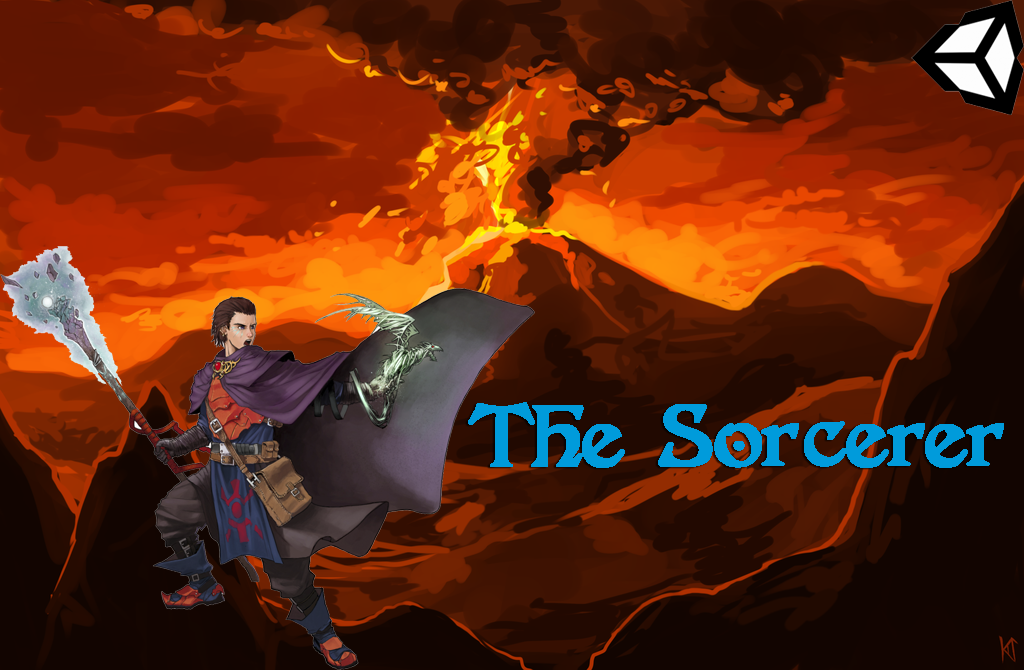
<style>
.page{position:relative;width:1024px;height:670px}
.page>*{position:absolute;margin:0}
.t1{font:96px "FantaisieArtistique";color:#009bdb;font-weight:bold}
</style>
<div class="page">
<p class="t1" style="left:468px;top:402px;width:536px;height:66px">The Sorcerer</p>
</div>
